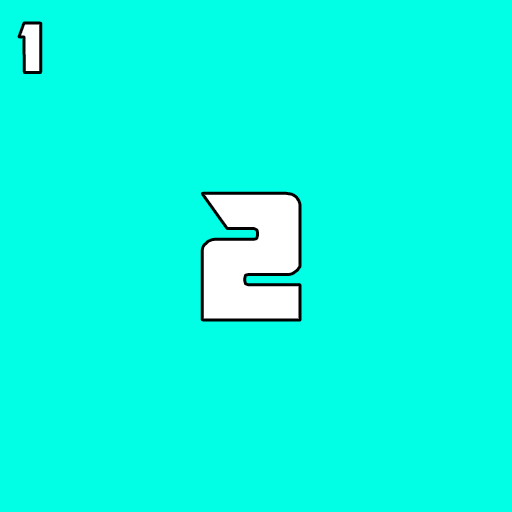
<style>
.page{position:relative;width:512px;height:512px;background:#00ffe5}
.page>*{position:absolute;margin:0}
.t1{font:86px "KlingonBlade";color:#ffffff}
.t2{font:221px "KlingonBlade";color:#ffffff}
</style>
<div class="page">
<p class="t1" style="left:19px;top:23px;width:22px;height:50px">1</p>
<p class="t2" style="left:202px;top:193px;width:98px;height:127px">2</p>
</div>
